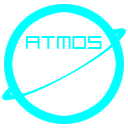
<style>
.page{position:relative;width:128px;height:128px;background:#ffffff}
.page>*{position:absolute;margin:0}
.t1{font:24px "LuggageRoundLight";color:#00ffff}
</style>
<div class="page">
<p class="t1" style="left:25px;top:36px;width:77px;height:13px">ATMOS</p>
</div>
